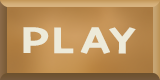
<style>
.page{position:relative;width:160px;height:80px}
.page>*{position:absolute;margin:0}
.t1{font:29.2px "KGBlankSpaceSolid";letter-spacing:0.1em;color:#edead9;scale:1.37 1}
</style>
<div class="page">
<p class="t1" style="left:23px;top:27px;width:113px;height:27px">PLAY</p>
</div>
